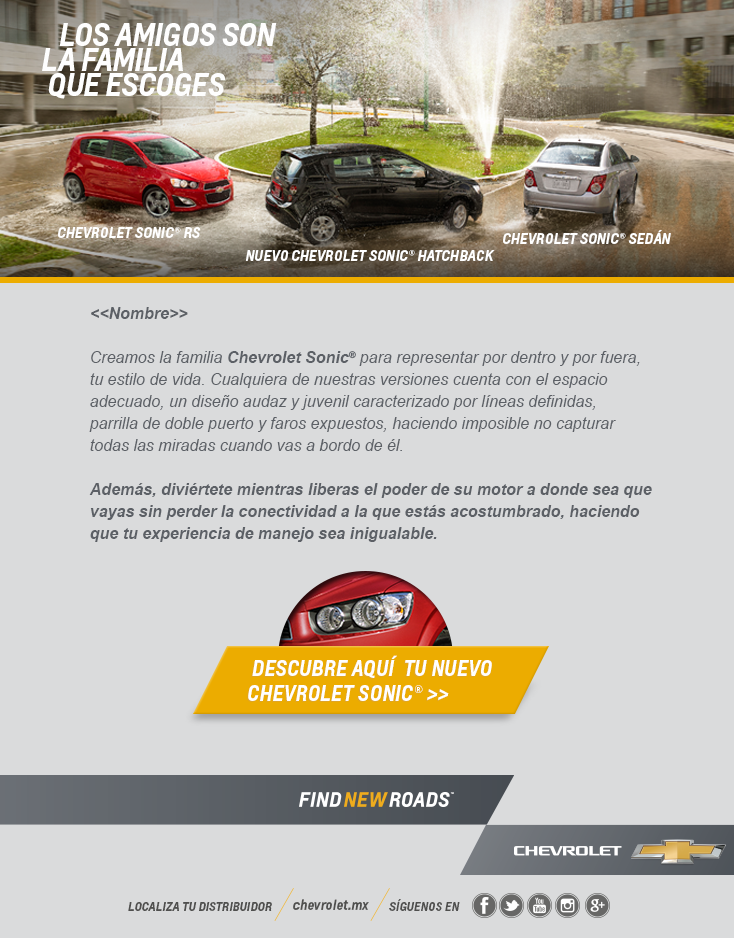
<style>
.page{position:relative;width:734px;height:938px;background:#dadbdc}
.page>*{position:absolute;margin:0}
.t1{font:16px/22px "Arial-ItalicMT";color:#5c6066}
.t2{font:16px/22px "Arial-BoldItalicMT";color:#5c6066}
</style>
<div class="page">
<p class="t1" style="left:89px;top:307px;width:563px;height:235px"><span class="t2">&lt;&lt;Nombre&gt;&gt;<br><br></span>Creamos la familia <span class="t2">Chevrolet Sonic®</span> para representar por dentro y por fuera, tu estilo de vida. Cualquiera de nuestras versiones cuenta con el espacio adecuado, un diseño audaz y juvenil caracterizado por líneas definidas, <br>parrilla de doble puerto y faros expuestos, haciendo imposible no capturar todas las miradas cuando vas a bordo de él.<br><br><span class="t2">Además, diviértete mientras liberas el poder de su motor a donde sea que vayas sin perder la conectividad a la que estás acostumbrado, haciendo <br>que tu experiencia de manejo sea inigualable.</span></p>
</div>
